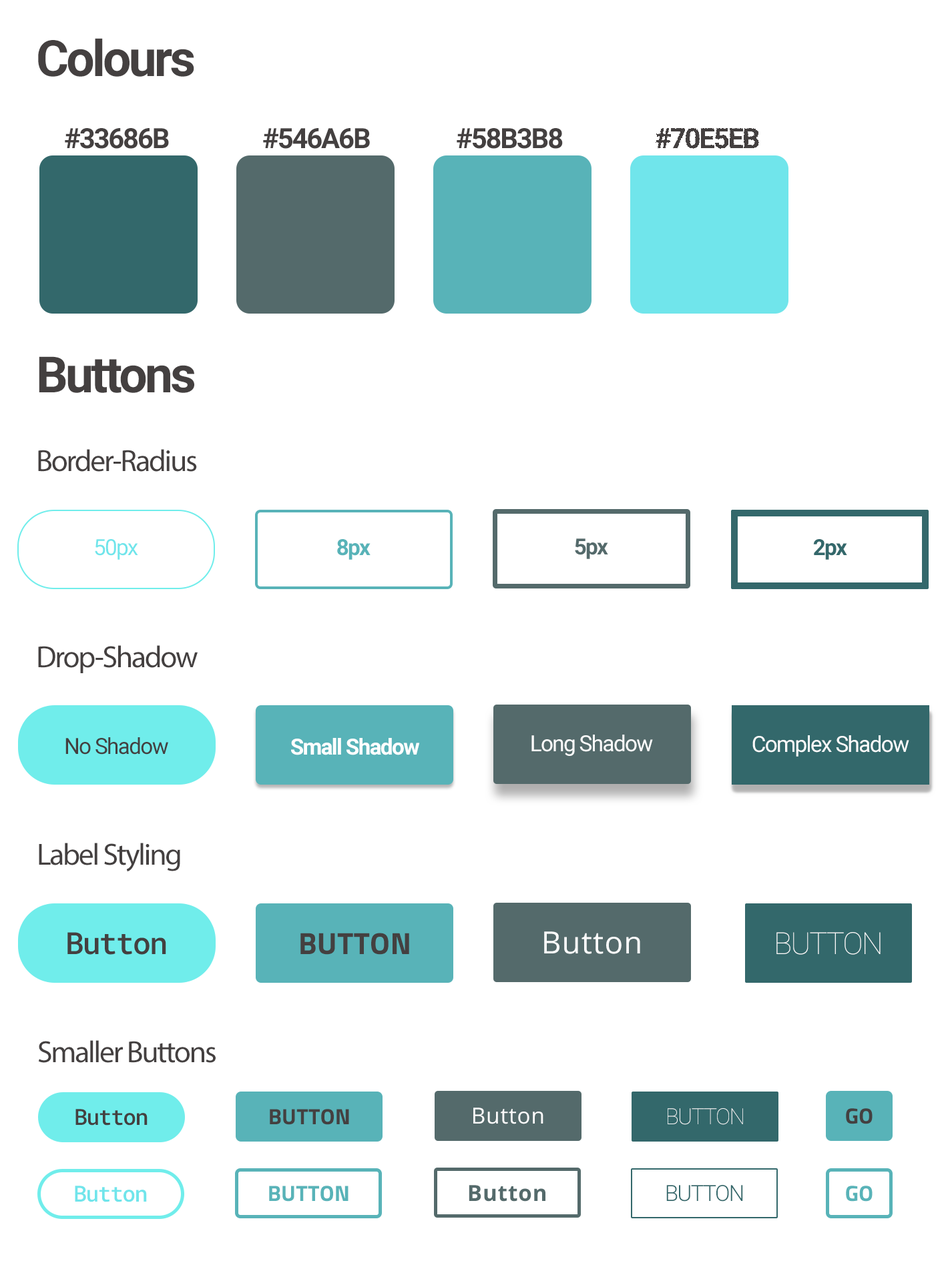
<style>
.page{position:relative;width:946px;height:1261px;background:#ffffff}
.page>*{position:absolute;margin:0}
.t1{font:50px "Roboto-Bold";letter-spacing:-0.05em;color:#444040}
.t2{font:27.8px "Roboto-Bold";letter-spacing:-0.05em;color:#444040}
.t3{font:30.6px "MyriadPro-Regular";letter-spacing:-0.05em;color:#444040}
.t4{font:22.2px "Roboto-Regular";letter-spacing:-0.05em;color:#70e5eb}
.t5{font:22.2px "Roboto-Bold";letter-spacing:-0.05em;color:#58b3b8}
.t6{font:22.2px "Roboto-Bold";letter-spacing:-0.05em;color:#546a6b}
.t7{font:22.2px "Roboto-Bold";letter-spacing:-0.05em;color:#33686b}
.t8{font:22.2px "Roboto-Regular";letter-spacing:-0.05em;color:#444040}
.t9{font:22.2px "Roboto-Bold";letter-spacing:-0.05em;color:#ffffff}
.t10{font:22.2px "Roboto-Regular";letter-spacing:-0.05em;color:#fbfbfb}
.t11{font:30.6px "RobotoMono-Medium";letter-spacing:-0.05em;color:#444040}
.t12{font:30.6px "Cairo-Bold";letter-spacing:0.01em;color:#444040}
.t13{font:30.6px "OpenSans";letter-spacing:0.025em;color:#fbfbfb}
.t14{font:30.6px "Roboto-Thin";letter-spacing:-0.05em;color:#fbfbfb}
.t15{font:22.2px "RobotoMono-Medium";letter-spacing:-0.05em;color:#444040}
.t16{font:22.2px "Cairo-Bold";letter-spacing:0.01em;color:#444040}
.t17{font:22.2px "OpenSans";letter-spacing:0.025em;color:#fbfbfb}
.t18{font:22.2px "Roboto-Thin";letter-spacing:-0.05em;color:#fbfbfb}
.t19{font:22.2px "RobotoMono-Medium";letter-spacing:-0.05em;color:#70e5eb}
.t20{font:22.2px "Cairo-Bold";letter-spacing:0.01em;color:#58b3b8}
.t21{font:22.2px "OpenSans-Bold";letter-spacing:0.025em;color:#546a6b}
.t22{font:22.2px "Roboto-Light";letter-spacing:-0.05em;color:#33686b}
</style>
<div class="page">
<p class="t1" style="left:38px;top:38px;width:156px;height:39px">Colours</p>
<p class="t2" style="left:65px;top:128px;width:104px;height:21px">#33686B</p>
<p class="t2" style="left:263px;top:128px;width:107px;height:21px">#546A6B</p>
<p class="t2" style="left:456px;top:128px;width:107px;height:21px">#58B3B8</p>
<p class="t2" style="left:655px;top:128px;width:104px;height:21px">#70E5EB</p>
<p class="t1" style="left:39px;top:356px;width:155px;height:37px">Buttons</p>
<p class="t3" style="left:38px;top:449px;width:159px;height:23px">Border-Radius</p>
<p class="t4" style="left:95px;top:539px;width:43px;height:21px">50px</p>
<p class="t5" style="left:337px;top:539px;width:33px;height:21px">8px</p>
<p class="t6" style="left:575px;top:538px;width:33px;height:21px">5px</p>
<p class="t7" style="left:813px;top:539px;width:34px;height:21px">2px</p>
<p class="t3" style="left:38px;top:645px;width:160px;height:28px">Drop-Shadow</p>
<p class="t8" style="left:65px;top:737px;width:103px;height:18px">No Shadow</p>
<p class="t9" style="left:291px;top:738px;width:129px;height:17px">Small Shadow</p>
<p class="t10" style="left:531px;top:735px;width:122px;height:21px">Long Shadow</p>
<p class="t10" style="left:752px;top:735px;width:157px;height:22px">Complex Shadow</p>
<p class="t3" style="left:39px;top:843px;width:141px;height:28px">Label Styling</p>
<p class="t11" style="left:67px;top:932px;width:99px;height:23px">Button</p>
<p class="t12" style="left:300px;top:933px;width:109px;height:22px">BUTTON</p>
<p class="t13" style="left:544px;top:932px;width:96px;height:22px">Button</p>
<p class="t14" style="left:776px;top:932px;width:104px;height:23px">BUTTON</p>
<p class="t3" style="left:38px;top:1040px;width:178px;height:23px">Smaller Buttons</p>
<p class="t15" style="left:75px;top:1109px;width:72px;height:17px">Button</p>
<p class="t16" style="left:270px;top:1109px;width:79px;height:16px">BUTTON</p>
<p class="t17" style="left:473px;top:1108px;width:70px;height:16px">Button</p>
<p class="t18" style="left:667px;top:1108px;width:76px;height:17px">BUTTON</p>
<p class="t16" style="left:845px;top:1108px;width:27px;height:16px">GO</p>
<p class="t19" style="left:75px;top:1186px;width:72px;height:16px">Button</p>
<p class="t20" style="left:269px;top:1186px;width:79px;height:16px">BUTTON</p>
<p class="t21" style="left:468px;top:1185px;width:77px;height:17px">Button</p>
<p class="t22" style="left:666px;top:1185px;width:77px;height:17px">BUTTON</p>
<p class="t20" style="left:845px;top:1186px;width:27px;height:16px">GO</p>
</div>
